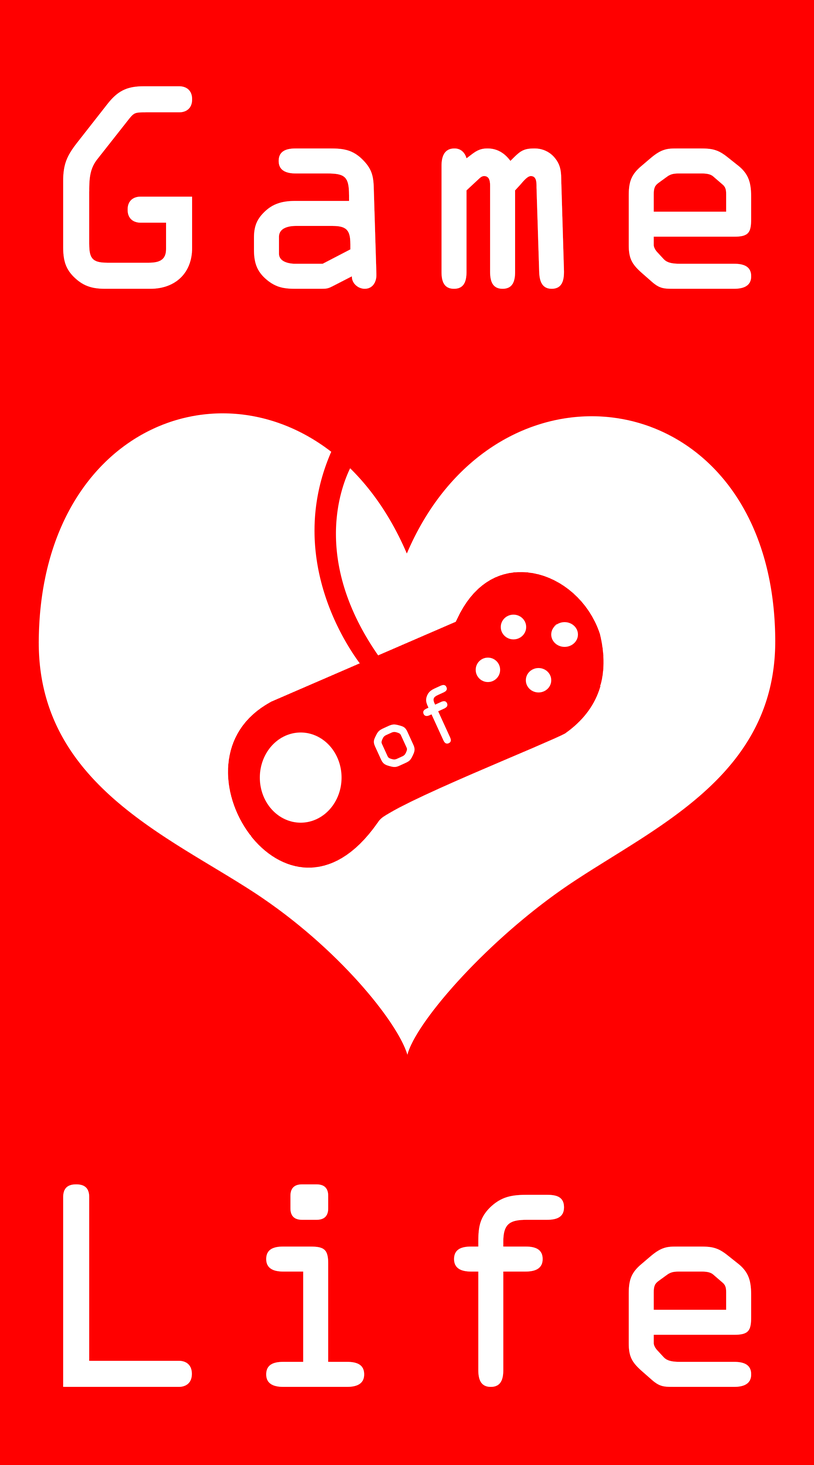
<style>
.page{position:relative;width:814px;height:1465px;background:#ff0000}
.page>*{position:absolute;margin:0}
.t1{font:260.5px "OCRAStd";color:#ffffff}
.t2{font:75.4px "OCRAStd";color:#ffffff}
</style>
<div class="page">
<p class="t1" style="left:63px;top:86px;width:688px;height:203px">Game</p>
<p class="t2" style="left:374px;top:685px;width:77px;height:82px;rotate:-25deg">of</p>
<p class="t1" style="left:63px;top:1184px;width:688px;height:203px">Life</p>
</div>
